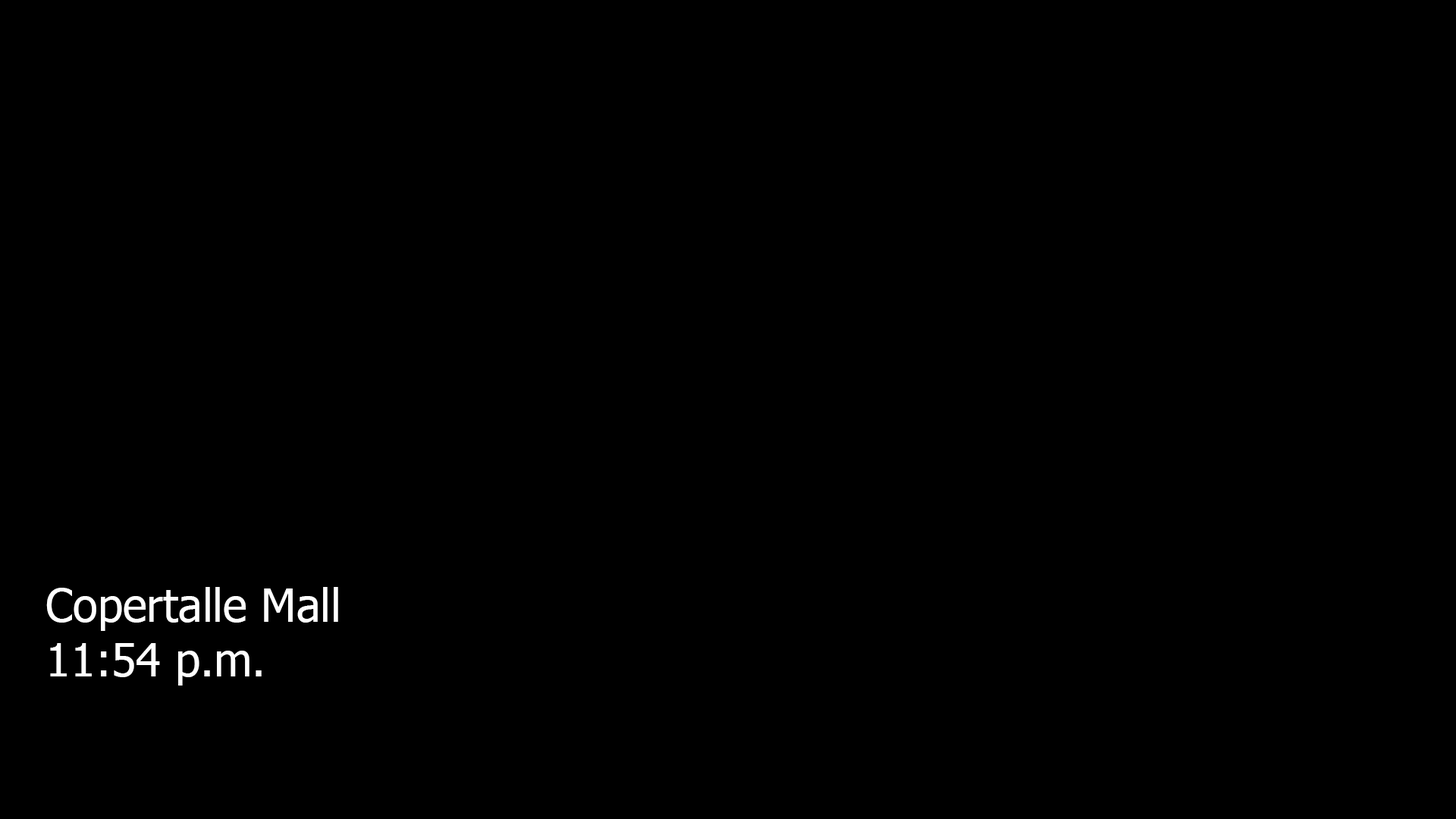
<style>
.page{position:relative;width:1456px;height:819px;background:#000000}
.page>*{position:absolute;margin:0}
.t1{font:45.5px "Tahoma";color:#ffffff}
</style>
<div class="page">
<p class="t1" style="left:46px;top:587px;width:292px;height:99px">Copertalle Mall<br>11:54 p.m.</p>
</div>
